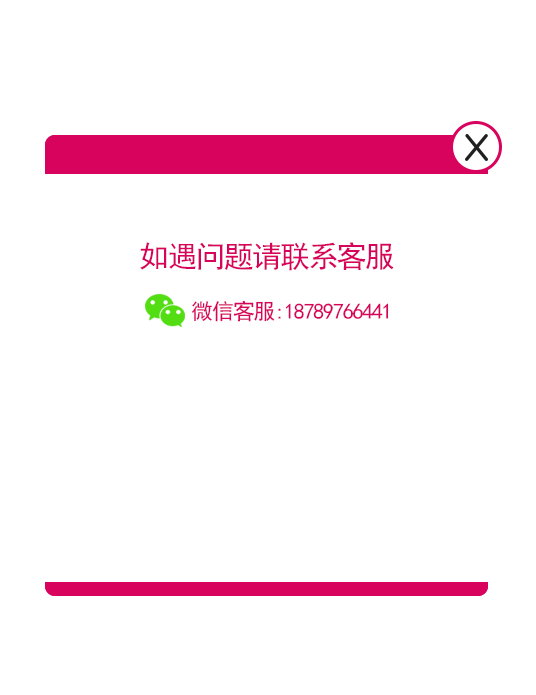
<style>
.page{position:relative;width:536px;height:695px;background:#ffffff}
.page>*{position:absolute;margin:0}
.t1{font:30px "SimHei";letter-spacing:-0.059em;color:#d8035d}
.t2{font:22px "SimHei";letter-spacing:-0.059em;color:#d8035d}
</style>
<div class="page">
<p class="t1" style="left:140px;top:242px;width:254px;height:29px">如遇问题请联系客服</p>
<p class="t2" style="left:192px;top:300px;width:197px;height:22px">微信客服:18789766441</p>
</div>
